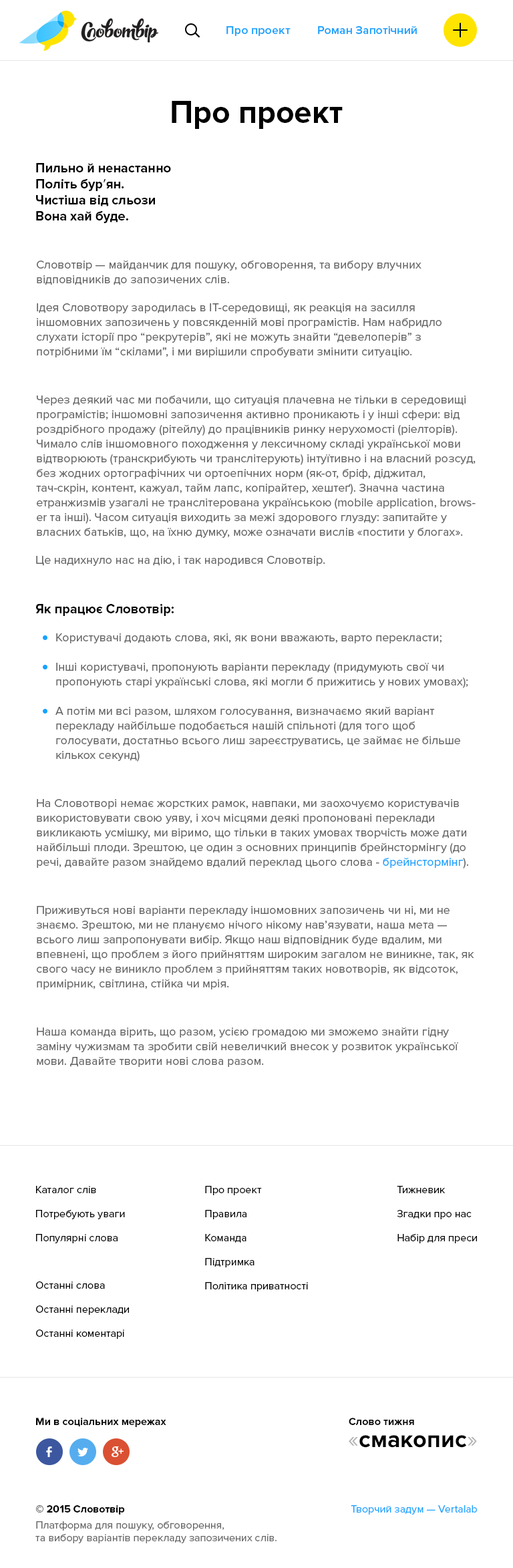
<style>
.page{position:relative;width:513px;height:1568px;background:#ffffff}
.page>*{position:absolute;margin:0}
.t1{font:12px "ProximaNova-Semibold";color:#17a2ff}
.t2{font:32.1px "ProximaNova-Bold";color:#000000}
.t3{font:13.4px "ProximaNova-Bold";color:#000000}
.t4{font:13.4px "MyriadPro-Regular";color:#000000}
.t5{font:12px/14.7px "ProximaNova-Regular";color:#666666}
.t6{font:12px "ProximaNova-Regular";color:#666666}
.t7{font:12px/14.7px "ProximaNova-Regular";color:#17a2ff}
.t8{font:10.7px/24.1px "ProximaNova-Regular";color:#000000}
.t9{font:10.7px/24.1px "ProximaNova-Regular";color:#010101}
.t10{font:10.7px "ProximaNova-Bold";color:#010101}
.t11{font:24px "ProximaNova-Bold";color:#000000}
.t12{font:24.1px "ProximaNova-Regular";color:#b3b3b3}
.t13{font:10.7px "ProximaNova-Regular";color:#666666}
.t14{font:10.7px/14.7px "ProximaNova-Bold";color:#000000}
.t15{font:10.7px/16px "ProximaNova-Regular";color:#666666}
.t16{font:10.7px "ProximaNova-Regular";color:#17a2ff}
</style>
<div class="page">
<p class="t1" style="left:226px;top:26px;width:65px;height:10px">Про проект</p>
<p class="t1" style="left:318px;top:26px;width:99px;height:8px">Роман Запотічний</p>
<p class="t2" style="left:172px;top:101px;width:171px;height:28px">Про проект</p>
<p class="t3" style="left:36px;top:163px;width:135px;height:60px">Пильно й ненастанно<br>Політь бур<span class="t4">’</span>ян.<br>Чистіша від сльози<br>Вона хай буде.</p>
<p class="t5" style="left:37px;top:260px;width:385px;height:25px">Словотвір — майданчик для пошуку, обговорення, та вибору влучних відповідників до запозичених слів.</p>
<p class="t5" style="left:37px;top:303px;width:405px;height:54px">Ідея Словотвору зародилась в IT-середовищі, як реакція на засилля іншомовних запозичень у повсякденній мові програмістів. Нам набридло слухати історії про “рекрутерів”, які не можуть знайти “девелоперів” з потрібними їм “скілами”, і ми вирішили спробувати змінити ситуацію.</p>
<p class="t5" style="left:36px;top:395px;width:440px;height:143px">Через деякий час ми побачили, що ситуація плачевна не тільки в середовищі програмістів; іншомовні запозичення активно проникають і у інші сфери: від роздрібного продажу (рітейлу) до працівників ринку нерухомості (ріелторів). Чимало слів іншомовного походження у лексичному складі української мови відтворюють (транскрибують чи транслітерують) інтуїтивно і на власний розсуд, без жодних ортографічних чи ортоепічних норм (як-от, бріф, діджитал, тач-скрін, контент, кажуал, тайм лапс, копірайтер, хештеґ). Значна частина етранжизмів узагалі не транслітерована українською (mobile application, browser та інші). Часом ситуація виходить за межі здорового глузду: запитайте у власних батьків, що, на їхню думку, може означати вислів «постити у блогах».</p>
<p class="t6" style="left:36px;top:556px;width:289px;height:10px">Це надихнуло нас на дію, і так народився Словотвір.</p>
<p class="t3" style="left:36px;top:604px;width:138px;height:12px">Як працює Словотвір:</p>
<p class="t5" style="left:55px;top:633px;width:413px;height:129px">Користувачі додають слова, які, як вони вважають, варто перекласти;<br><br>Інші користувачі, пропонують варіанти перекладу (придумують свої чи пропонують старі українські слова, які могли б прижитись у нових умовах);<br><br>А потім ми всі разом, шляхом голосування, визначаємо який варіант перекладу найбільше подобається нашій спільноті (для того щоб голосувати, достатньо всього лиш зареєструватись, це займає не більше кількох секунд)</p>
<p class="t5" style="left:37px;top:799px;width:431px;height:70px">На Словотворі немає жорстких рамок, навпаки, ми заохочуємо користувачів використовувати свою уяву, і хоч місцями деякі пропоновані переклади викликають усмішку, ми віримо, що тільки в таких умовах творчість може дати найбільші плоди. Зрештою, це один з основних принципів брейнстормінгу (до речі, давайте разом знайдемо вдалий переклад цього слова - <span class="t7">брейнстормінг</span>).</p>
<p class="t5" style="left:36px;top:906px;width:438px;height:83px">Приживуться нові варіанти перекладу іншомовних запозичень чи ні, ми не знаємо. Зрештою, ми не плануємо нічого нікому нав’язувати, наша мета — всього лиш запропонувати вибір. Якщо наш відповідник буде вдалим, ми впевнені, що проблем з його прийняттям широким загалом не виникне, так, як свого часу не виникло проблем з прийняттям таких новотворів, як відсоток, примірник, світлина, стійка чи мрія.</p>
<p class="t5" style="left:36px;top:1027px;width:422px;height:40px">Наша команда вірить, що разом, усією громадою ми зможемо знайти гідну заміну чужизмам та зробити свій невеличкий внесок у розвиток української мови. Давайте творити нові слова разом.</p>
<p class="t8" style="left:36px;top:1186px;width:89px;height:57px">Каталог слів<br>Потребують уваги<br>Популярні слова</p>
<p class="t8" style="left:205px;top:1186px;width:103px;height:105px">Про проект<br>Правила<br>Команда<br>Підтримка<br>Політика приватності</p>
<p class="t9" style="left:397px;top:1186px;width:80px;height:57px">Тижневик<br>Згадки про нас<br>Набір для преси</p>
<p class="t8" style="left:36px;top:1281px;width:93px;height:58px">Останні слова<br>Останні переклади<br>Останні коментарі</p>
<p class="t10" style="left:36px;top:1418px;width:130px;height:9px">Ми в соціальних мережах</p>
<p class="t10" style="left:349px;top:1418px;width:65px;height:7px">Слово тижня</p>
<p class="t11" style="left:349px;top:1435px;width:128px;height:13px"><span class="t12">«</span>смакопис<span class="t12">»</span></p>
<p class="t13" style="left:35px;top:1505px;width:242px;height:38px"><span class="t14">© 2015 Словотвір<br></span><span class="t15">Платформа для пошуку, обговорення,<br></span>та вибору варіантів перекладу запозичених слів.</p>
<p class="t16" style="left:351px;top:1505px;width:126px;height:10px">Творчий задум — Vertalab</p>
</div>
